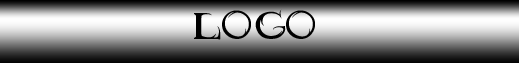
<style>
.page{position:relative;width:519px;height:63px}
.page>*{position:absolute;margin:0}
.t1{font:41.7px "AJensonPro-Regular";color:#000000}
</style>
<div class="page">
<p class="t1" style="left:194px;top:9px;width:121px;height:31px">LOGO</p>
</div>
